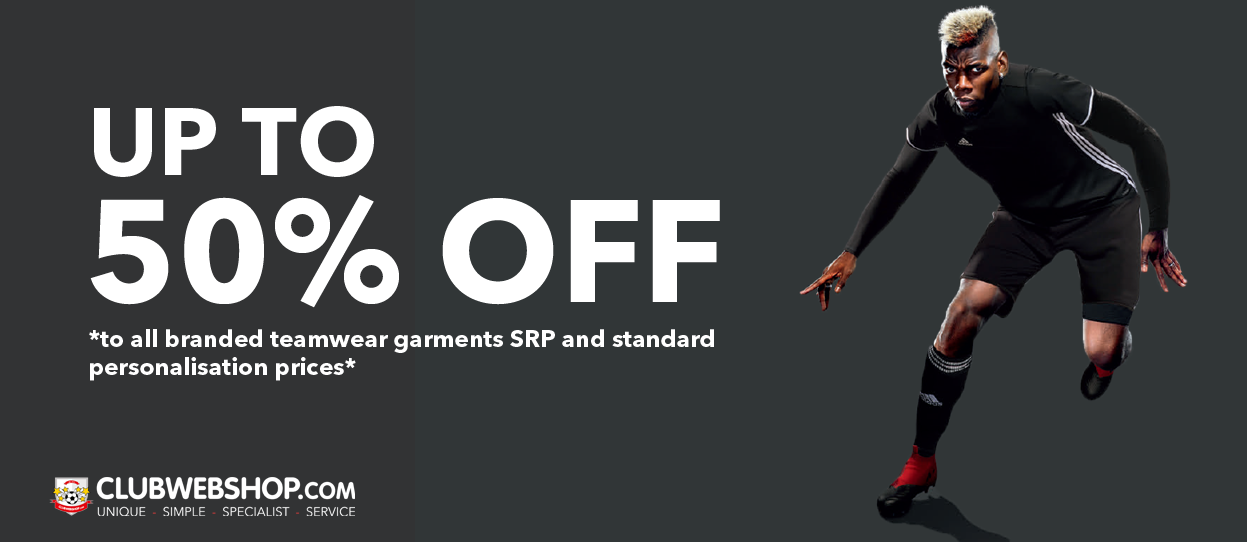
<style>
.page{position:relative;width:1247px;height:542px;background:#313637}
.page>*{position:absolute;margin:0}
.t1{font:94.3px "AvenirNextLTPro-Bold";color:#ffffff}
.t2{font:143.7px "AvenirNextLTPro-Bold";color:#ffffff}
.t3{font:23.9px "AvenirNextLTPro-Bold";color:#ffffff}
</style>
<div class="page">
<p class="t1" style="left:94px;top:106px;width:280px;height:71px">UP TO</p>
<p class="t2" style="left:90px;top:195px;width:630px;height:113px">50% OFF</p>
<p class="t3" style="left:89px;top:329px;width:625px;height:52px">*to all branded teamwear garments SRP and standard <br>personalisation prices*</p>
</div>
